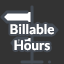
<style>
.page{position:relative;width:64px;height:64px;background:#333333}
.page>*{position:absolute;margin:0}
.t1{font:13.3px "Lato-Bold";color:#ffffff}
</style>
<div class="page">
<p class="t1" style="left:10px;top:24px;width:44px;height:27px;text-align:center">Billable<br>Hours</p>
</div>
